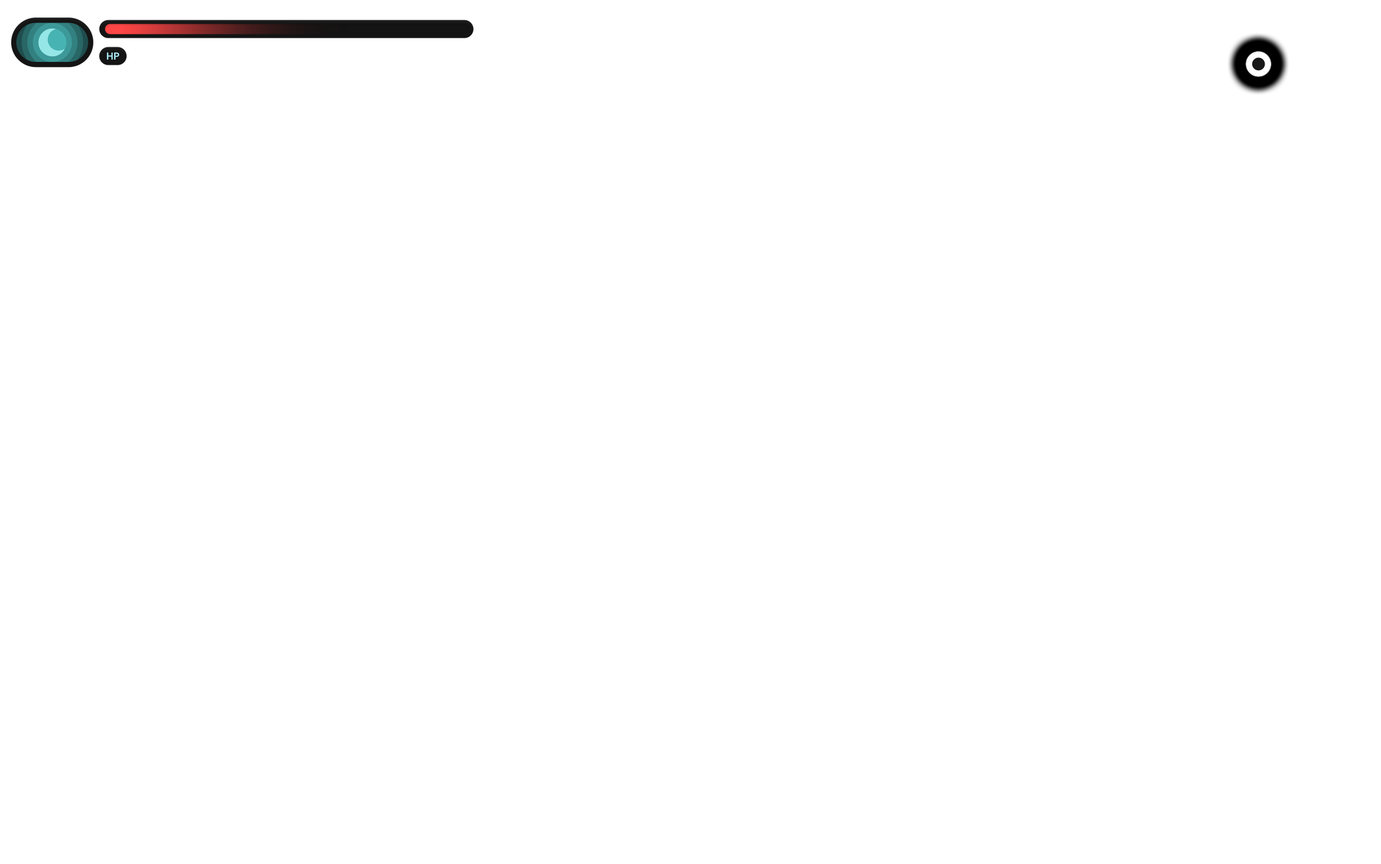
<style>
.page{position:relative;width:1381px;height:864px;background:#ffffff}
.page>*{position:absolute;margin:0}
.t1{font:10.1px "Poppins-Medium";color:#b2f2ff}
</style>
<div class="page">
<p class="t1" style="left:107px;top:52px;width:12px;height:8px">HP</p>
</div>
